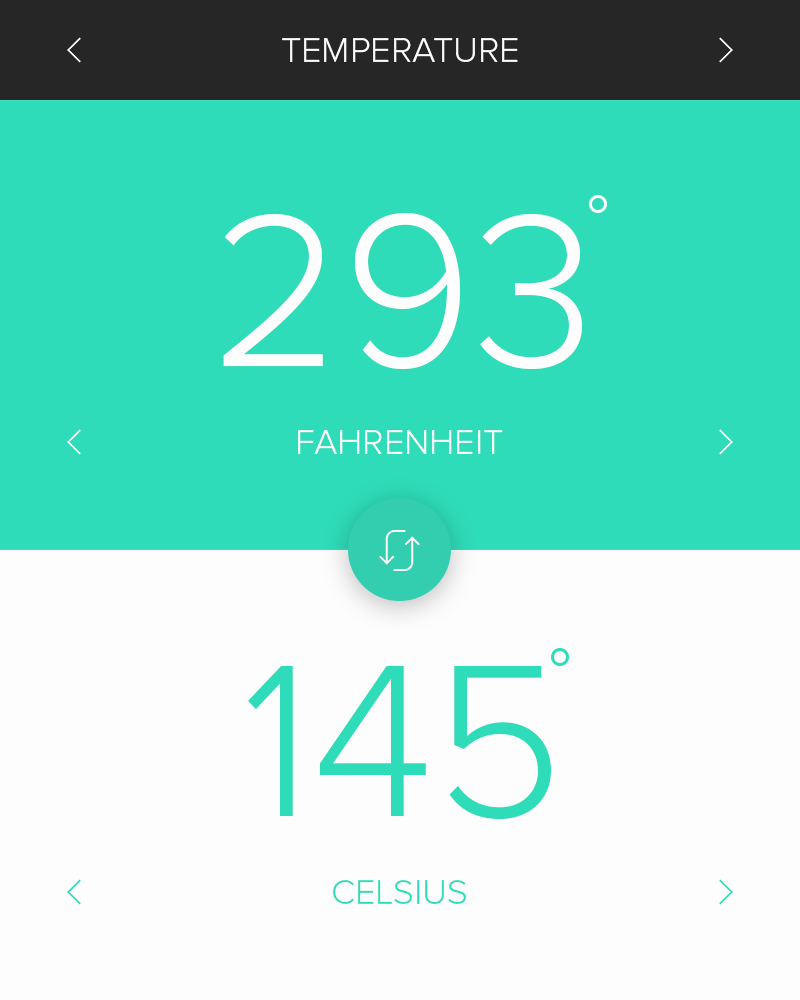
<style>
.page{position:relative;width:800px;height:1000px;background:#fdfdfd}
.page>*{position:absolute;margin:0}
.t1{font:36px "ProximaNova-Light";color:#fdfdfd}
.t2{font:225px "ProximaNova-Light";color:#fdfdfd}
.t3{font:225px "ProximaNova-Light";color:#2edcb9}
.t4{font:36px "ProximaNova-Light";color:#2edcb9}
</style>
<div class="page">
<p class="t1" style="left:282px;top:38px;width:236px;height:24px">TEMPERATURE</p>
<p class="t2" style="left:223px;top:213px;width:359px;height:157px">293</p>
<p class="t1" style="left:298px;top:430px;width:205px;height:24px">FAHRENHEIT</p>
<p class="t3" style="left:248px;top:666px;width:303px;height:154px">145</p>
<p class="t4" style="left:333px;top:880px;width:133px;height:24px">CELSIUS</p>
</div>
